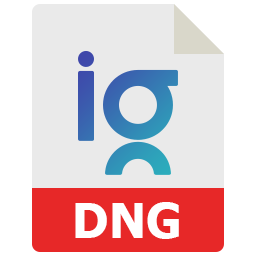
<style>
.page{position:relative;width:256px;height:256px;background:#eaeaea}
.page>*{position:absolute;margin:0}
.t1{font:48px "Tahoma-Bold";color:#ffffff}
</style>
<div class="page">
<p class="t1" style="left:75px;top:202px;width:104px;height:37px">DNG</p>
</div>
